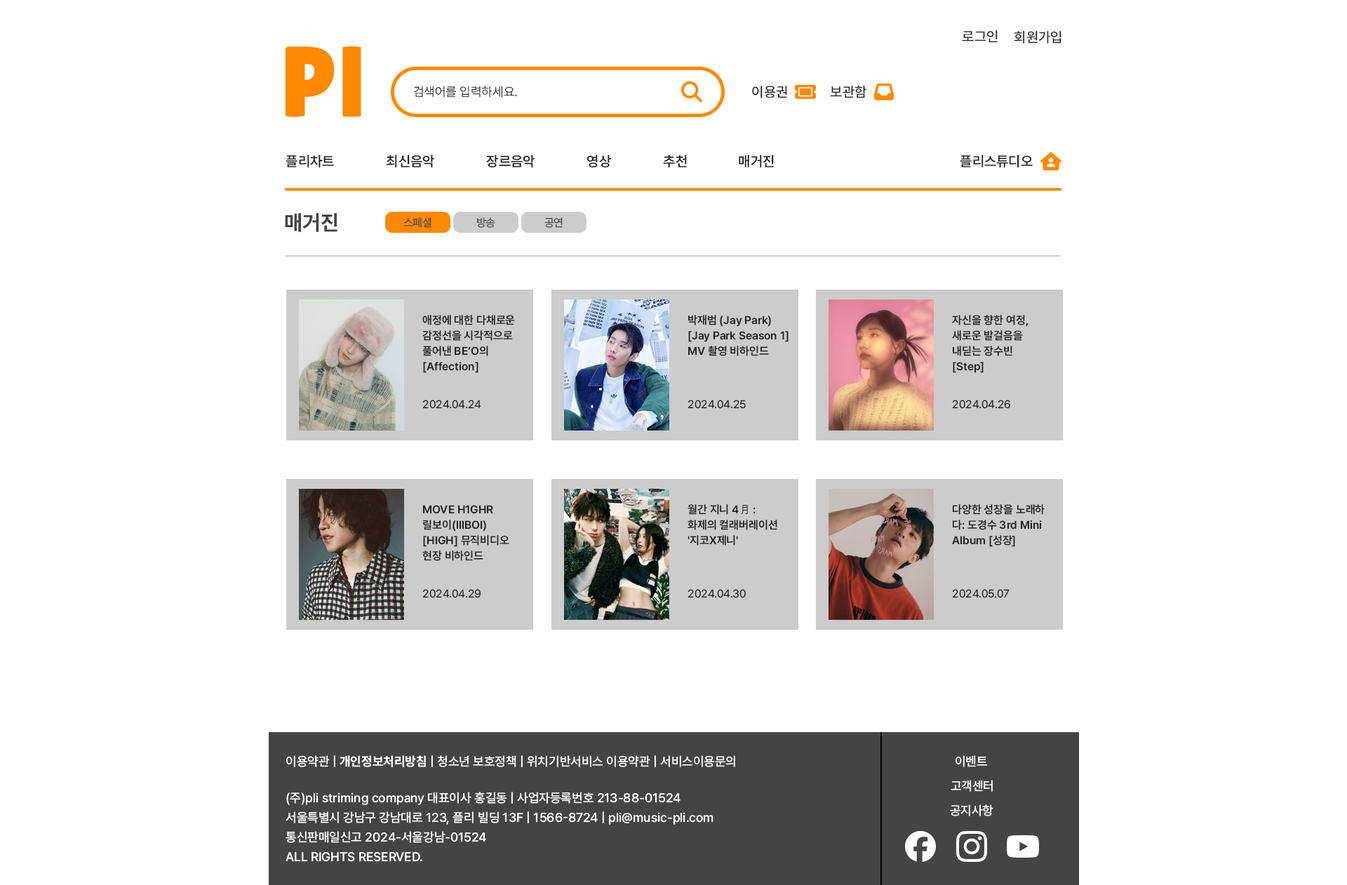
<style>
.page{position:relative;width:1347px;height:885px;background:#ffffff}
.page>*{position:absolute;margin:0}
.t1{font:14px "Pretendard-Medium";color:#222222}
.t2{font:12.6px "Pretendard-Light";color:#222222}
.t3{font:14px "Pretendard-SemiBold";color:#222222}
.t4{font:21px "Pretendard-Bold";color:#444444}
.t5{font:11.2px "Pretendard-Regular";color:#444444}
.t6{font:11.2px/15.4px "Pretendard-SemiBold";color:#222222}
.t7{font:11.2px "Pretendard-Regular";color:#222222}
.t8{font:11.2px/15.4px "Gulim";color:#222222}
.t9{font:12.6px "Pretendard-Medium";color:#ffffff}
.t10{font:12.6px "Pretendard-Bold";color:#ffffff}
.t11{font:12.6px/19.6px "Pretendard-Medium";color:#ffffff}
</style>
<div class="page">
<p class="t1" style="left:962px;top:30px;width:36px;height:13px">로그인</p>
<p class="t1" style="left:1014px;top:31px;width:47px;height:12px">회원가입</p>
<p class="t2" style="left:413px;top:86px;width:104px;height:12px">검색어를 입력하세요.</p>
<p class="t1" style="left:752px;top:86px;width:35px;height:12px">이용권</p>
<p class="t1" style="left:830px;top:86px;width:36px;height:12px">보관함</p>
<p class="t3" style="left:286px;top:155px;width:48px;height:13px">플리차트</p>
<p class="t3" style="left:386px;top:155px;width:48px;height:13px">최신음악</p>
<p class="t3" style="left:486px;top:155px;width:49px;height:13px">장르음악</p>
<p class="t3" style="left:586px;top:155px;width:25px;height:13px">영상</p>
<p class="t3" style="left:663px;top:155px;width:24px;height:13px">추천</p>
<p class="t3" style="left:739px;top:155px;width:35px;height:13px">매거진</p>
<p class="t3" style="left:960px;top:155px;width:73px;height:13px">플리스튜디오</p>
<p class="t4" style="left:285px;top:213px;width:52px;height:19px">매거진</p>
<p class="t5" style="left:403px;top:217px;width:28px;height:11px">스페셜</p>
<p class="t5" style="left:477px;top:217px;width:18px;height:11px">방송</p>
<p class="t5" style="left:544px;top:217px;width:19px;height:11px">공연</p>
<p class="t6" style="left:422px;top:315px;width:93px;height:58px">애정에 대한 다채로운<br>감정선을 시각적으로 <br>풀어낸 BE’O의 <br>[Affection]</p>
<p class="t6" style="left:687px;top:315px;width:102px;height:41px">박재범 (Jay Park)<br>[Jay Park Season 1]<br>MV 촬영 비하인드</p>
<p class="t6" style="left:952px;top:315px;width:76px;height:58px">자신을 향한 여정,<br>새로운 발걸음을 <br>내딛는 장수빈 <br>[Step]</p>
<p class="t7" style="left:422px;top:400px;width:59px;height:9px">2024.04.24</p>
<p class="t7" style="left:687px;top:400px;width:59px;height:9px">2024.04.25</p>
<p class="t7" style="left:952px;top:400px;width:58px;height:9px">2024.04.26</p>
<p class="t6" style="left:422px;top:505px;width:87px;height:56px">MOVE H1GHR <br>릴보이(lIlBOI) <br>[HIGH] 뮤직비디오<br>현장 비하인드</p>
<p class="t6" style="left:687px;top:504px;width:90px;height:42px">월간 지니 4<span class="t8">月</span> : <br>화제의 컬래버레이션<br>'지코X제니'</p>
<p class="t6" style="left:952px;top:504px;width:93px;height:43px">다양한 성장을 노래하<br>다: 도경수 3rd Mini<br>Album [성장]</p>
<p class="t7" style="left:422px;top:589px;width:59px;height:9px">2024.04.29</p>
<p class="t7" style="left:687px;top:589px;width:59px;height:9px">2024.04.30</p>
<p class="t7" style="left:952px;top:589px;width:57px;height:9px">2024.05.07</p>
<p class="t9" style="left:286px;top:756px;width:449px;height:11px">이용약관 | <span class="t10">개인정보처리방침</span> | 청소년 보호정책 | 위치기반서비스 이용약관 | 서비스이용문의</p>
<p class="t9" style="left:955px;top:756px;width:33px;height:11px">이벤트</p>
<p class="t9" style="left:951px;top:780px;width:42px;height:12px">고객센터</p>
<p class="t11" style="left:286px;top:792px;width:427px;height:70px">(주)pli striming company 대표이사 홍길동 | 사업자등록번호 213-88-01524<br>서울특별시 강남구 강남대로 123, 플리 빌딩 13F | 1566-8724 | pli@music-pli.com<br>통신판매일신고 2024-서울강남-01524      <br>ALL RIGHTS RESERVED.</p>
<p class="t9" style="left:950px;top:805px;width:43px;height:12px">공지사항</p>
</div>
